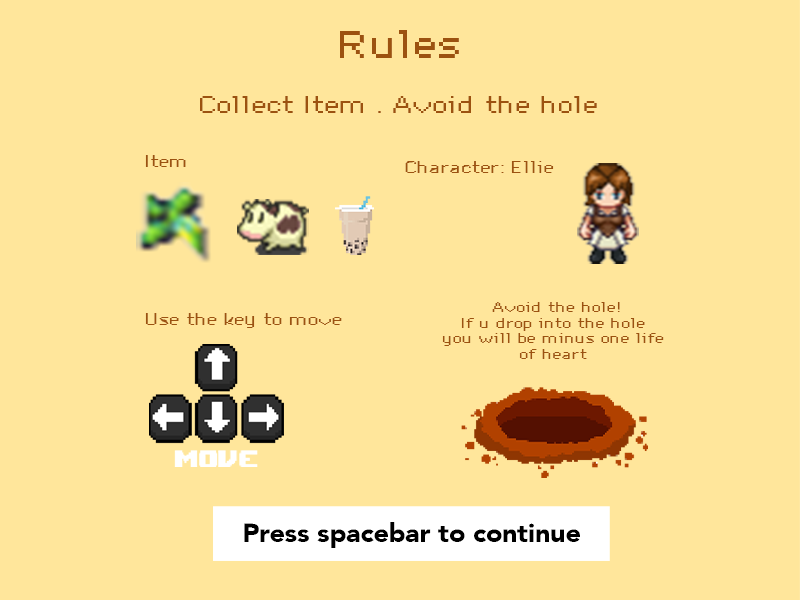
<style>
.page{position:relative;width:800px;height:600px;background:#ffe69b}
.page>*{position:absolute;margin:0}
.t1{font:35.2px "DePixel-Breit";color:#9c5210}
.t2{font:22.2px "DePixel-Breit";color:#9c5210}
.t3{font:15.1px "DePixel-Breit";color:#9c5210}
.t4{font:13.3px "DePixel-Breit";color:#9c5210}
.t5{font:26.5px "AvenirLT-Black";color:#000000}
</style>
<div class="page">
<p class="t1" style="left:340px;top:30px;width:119px;height:28px">Rules</p>
<p class="t2" style="left:200px;top:96px;width:397px;height:17px">Collect Item . Avoid the hole</p>
<p class="t3" style="left:145px;top:155px;width:41px;height:12px">Item</p>
<p class="t3" style="left:405px;top:161px;width:149px;height:12px">Character: Ellie</p>
<p class="t4" style="left:442px;top:302px;width:222px;height:57px;text-align:center">Avoid the hole!<br>If u drop into the hole <br>you will be minus one life <br>of heart</p>
<p class="t3" style="left:145px;top:313px;width:197px;height:15px">Use the key to move</p>
<p class="t5" style="left:244px;top:522px;width:336px;height:26px">Press spacebar to continue</p>
</div>
